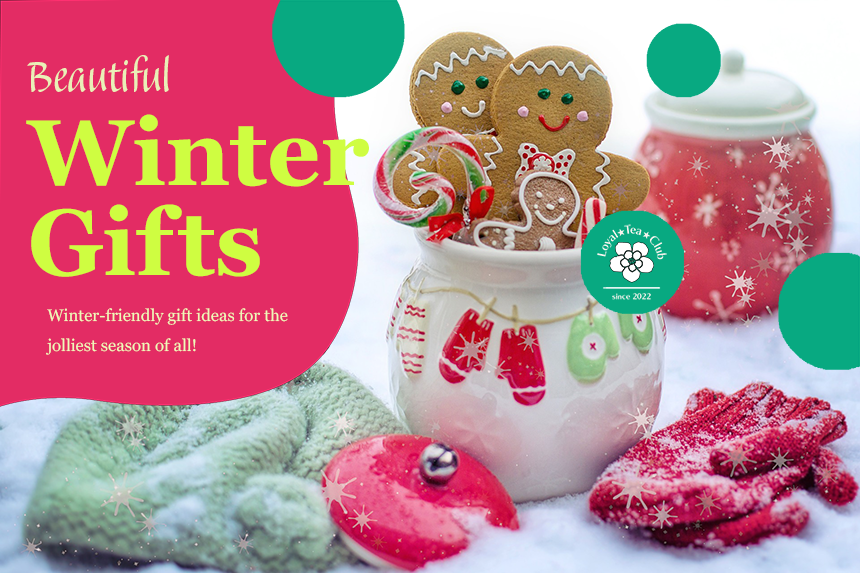
<style>
.page{position:relative;width:860px;height:573px;background:#e32c64}
.page>*{position:absolute;margin:0}
.t1{font:56px "BalzanoStd";color:#e9f0b8}
.t2{font:93.3px/89.5px "Georgia-Bold";color:#cffd41}
.t3{font:16.8px "Georgia";color:#eff9bb}
</style>
<div class="page">
<p class="t1" style="left:27px;top:55px;width:142px;height:37px">Beautiful</p>
<p class="t2" style="left:26px;top:114px;width:343px;height:163px">Winter<br>Gifts</p>
<p class="t3" style="left:46px;top:308px;width:242px;height:47px">Winter-friendly gift ideas for the <br>jolliest season of all!</p>
</div>
